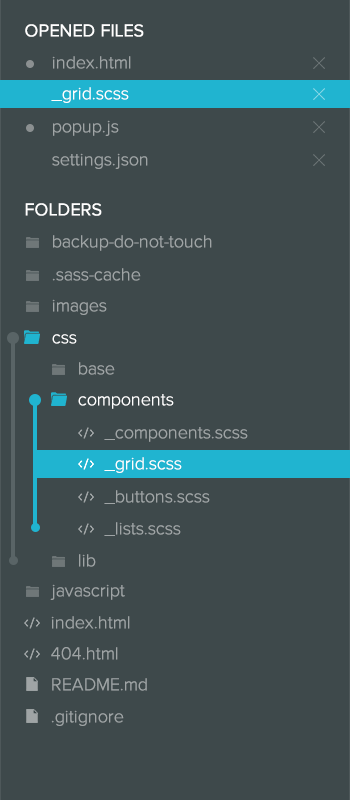
<style>
.page{position:relative;width:350px;height:800px;background:#3e494b}
.page>*{position:absolute;margin:0}
.t1{font:18px "ProximaNova-Regular";color:#ffffff}
.t2{font:18px "ProximaNova-Light";color:#9fa4a5}
.t3{font:18px "ProximaNova-Light";color:#ffffff}
</style>
<div class="page">
<p class="t1" style="left:25px;top:24px;width:119px;height:13px">OPENED FILES</p>
<p class="t2" style="left:52px;top:56px;width:79px;height:13px">index.html</p>
<p class="t3" style="left:51px;top:87px;width:78px;height:16px">_grid.scss</p>
<p class="t2" style="left:53px;top:120px;width:66px;height:16px">popup.js</p>
<p class="t2" style="left:52px;top:153px;width:96px;height:16px">settings.json</p>
<p class="t1" style="left:25px;top:203px;width:77px;height:13px">FOLDERS</p>
<p class="t2" style="left:53px;top:235px;width:159px;height:16px">backup-do-not-touch</p>
<p class="t2" style="left:52px;top:268px;width:89px;height:13px">.sass-cache</p>
<p class="t2" style="left:52px;top:299px;width:55px;height:16px">images</p>
<p class="t3" style="left:52px;top:334px;width:25px;height:10px">css</p>
<p class="t2" style="left:79px;top:362px;width:36px;height:13px">base</p>
<p class="t3" style="left:78px;top:394px;width:96px;height:15px">components</p>
<p class="t2" style="left:104px;top:427px;width:144px;height:15px">_components.scss</p>
<p class="t3" style="left:104px;top:457px;width:78px;height:16px">_grid.scss</p>
<p class="t2" style="left:104px;top:490px;width:106px;height:14px">_buttons.scss</p>
<p class="t2" style="left:104px;top:522px;width:77px;height:14px">_lists.scss</p>
<p class="t2" style="left:79px;top:554px;width:17px;height:13px">lib</p>
<p class="t2" style="left:50px;top:584px;width:75px;height:16px">javascript</p>
<p class="t2" style="left:51px;top:616px;width:79px;height:13px">index.html</p>
<p class="t2" style="left:51px;top:647px;width:67px;height:13px">404.html</p>
<p class="t2" style="left:52px;top:678px;width:95px;height:13px">README.md</p>
<p class="t2" style="left:51px;top:710px;width:73px;height:16px">.gitignore</p>
</div>
